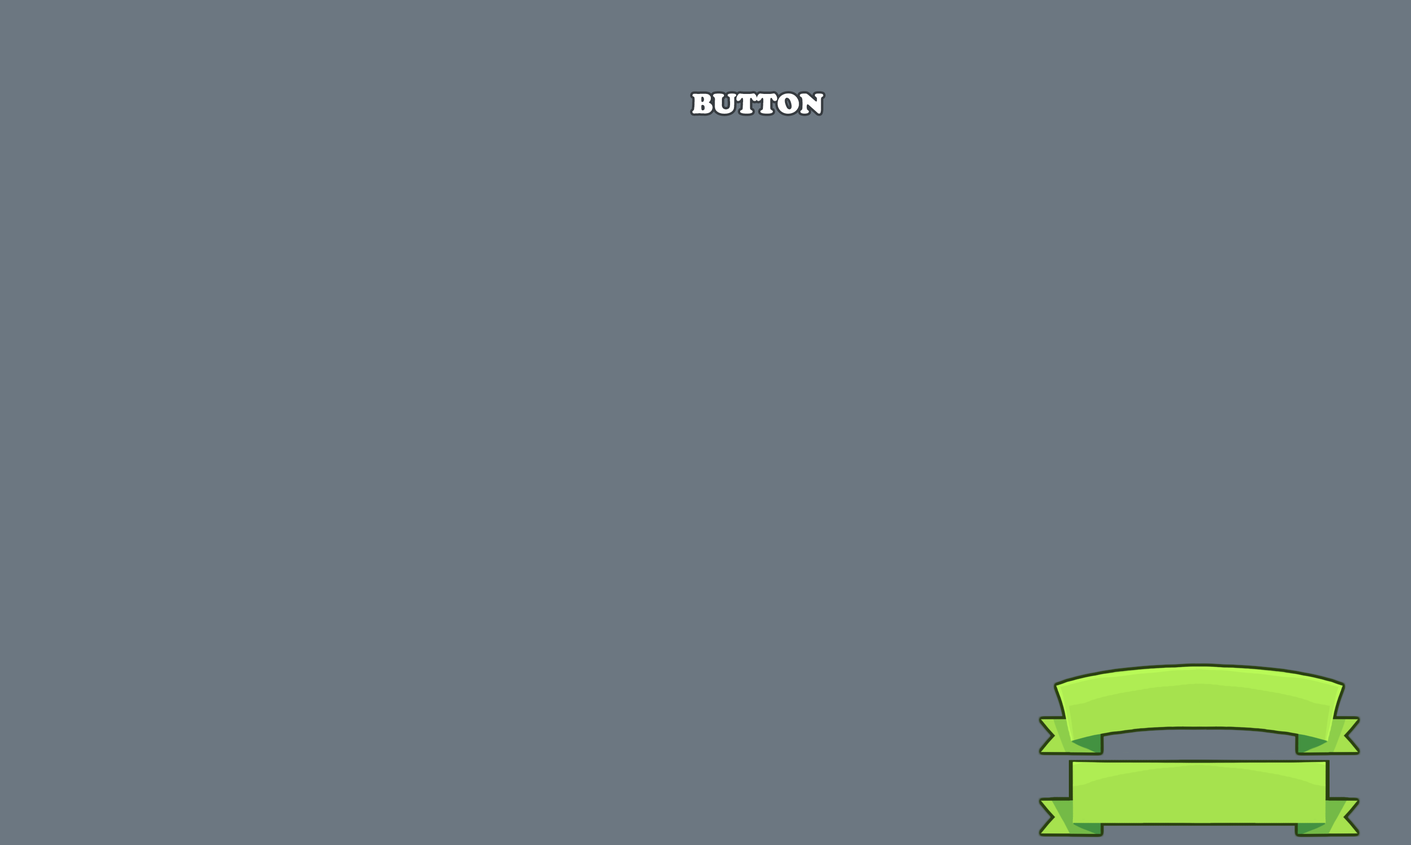
<style>
.page{position:relative;width:1411px;height:845px;background:#6c7781}
.page>*{position:absolute;margin:0}
.t1{font:28.9px "CooperBlack";color:#ffffff}
</style>
<div class="page">
<p class="t1" style="left:692px;top:93px;width:131px;height:21px">BUTTON</p>
</div>
